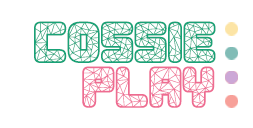
<style>
.page{position:relative;width:253px;height:128px;background:#ffffff}
.page>*{position:absolute;margin:0}
.t1{font:59.2px "Duration-Regular";color:#19a277}
.t2{font:59.2px "Duration-Regular";color:#ee6c91}
</style>
<div class="page">
<p class="t1" style="left:34px;top:21px;width:182px;height:42px">COSSIE</p>
<p class="t2" style="left:82px;top:66px;width:133px;height:42px">PLAY</p>
</div>
